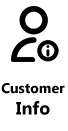
<style>
.page{position:relative;width:68px;height:131px;background:#ffffff}
.page>*{position:absolute;margin:0}
.t1{font:14px "MicrosoftTaiLe-Bold";color:#000000}
.t2{font:18px "MicrosoftTaiLe-Bold";color:#000000}
</style>
<div class="page">
<p class="t1" style="left:1px;top:83px;width:64px;height:32px;text-align:center">Customer<br><span class="t2">Info</span></p>
</div>
